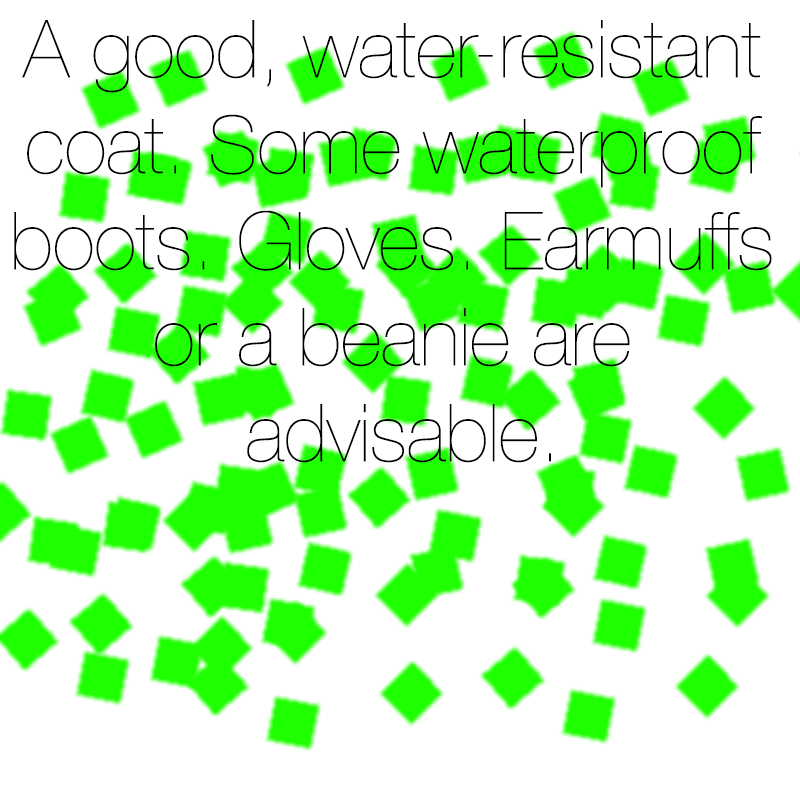
<style>
.page{position:relative;width:800px;height:800px;background:#ffffff}
.page>*{position:absolute;margin:0}
.t1{font:80px "HelveticaNeue-UltraLight";color:#000000}
</style>
<div class="page">
<p class="t1" style="left:14px;top:20px;width:758px;height:443px;text-align:center">A good, water-resistant <br>coat. Some waterproof <br>boots. Gloves. Earmuffs <br>or a beanie are <br>advisable.</p>
</div>
